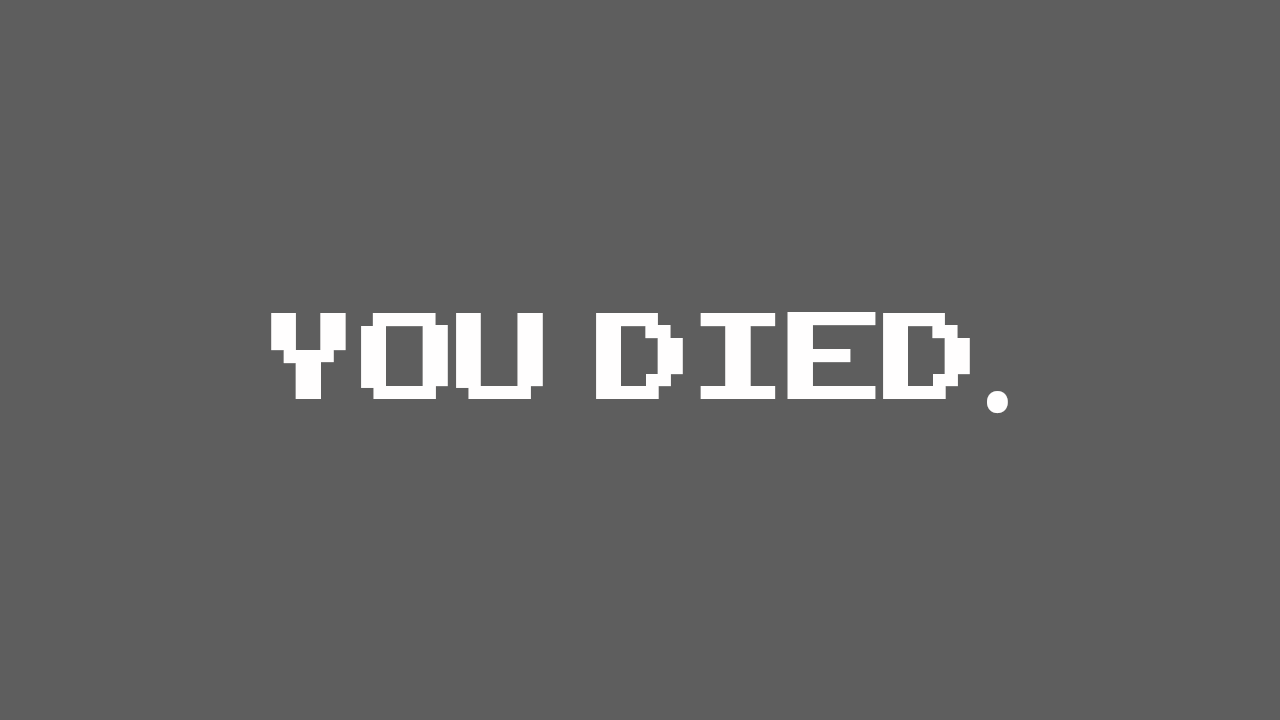
<style>
.page{position:relative;width:1280px;height:720px;background:#5e5e5e}
.page>*{position:absolute;margin:0}
.t1{font:173.7px "ArcadeClassic";color:#fffefe}
.t2{font:173.7px "MyriadPro-Regular";color:#fffefe}
</style>
<div class="page">
<p class="t1" style="left:271px;top:312px;width:737px;height:102px">You  died<span class="t2">.</span></p>
</div>
